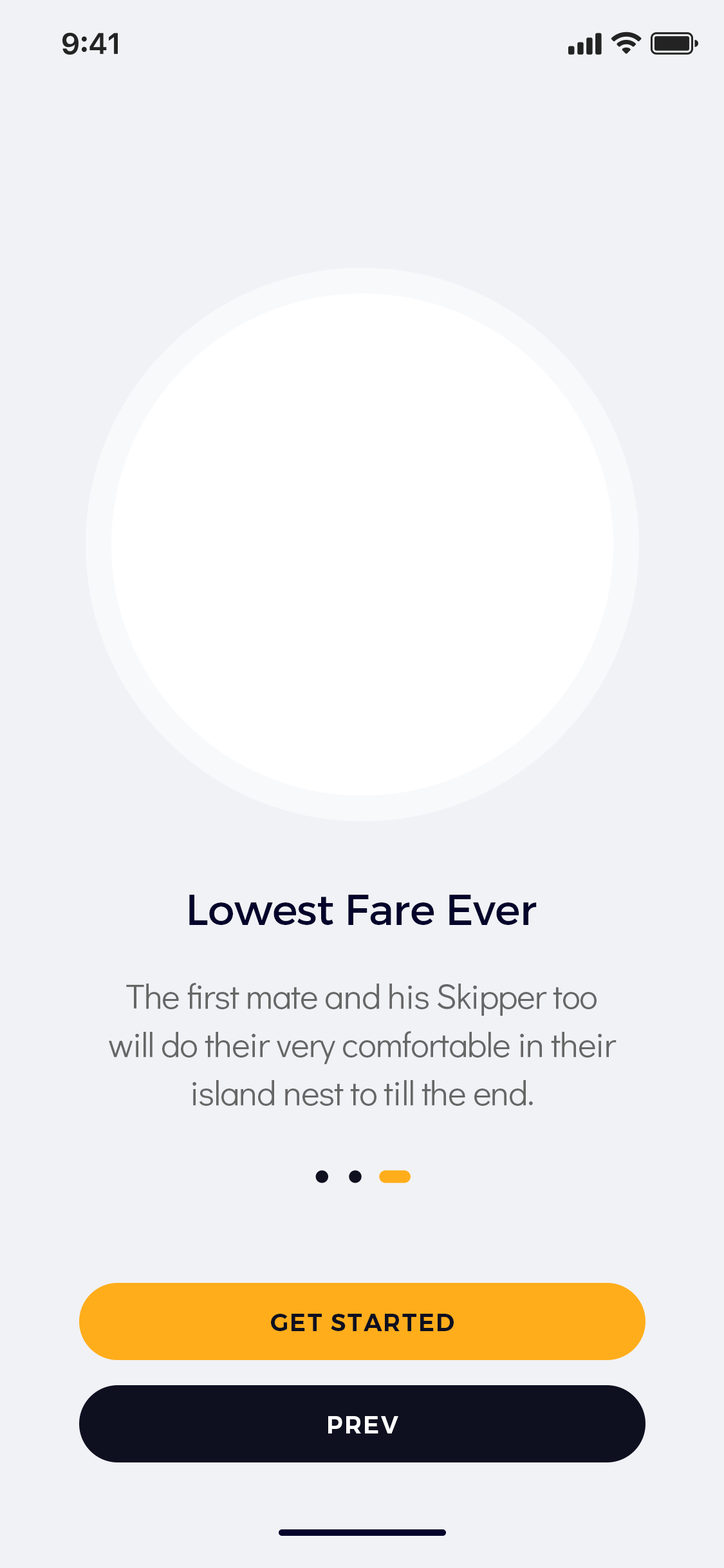
<style>
.page{position:relative;width:724px;height:1568px;background:#f1f2f6}
.page>*{position:absolute;margin:0}
.t1{font:42.9px "Montserrat-Regular";letter-spacing:-0.01em;color:#03032b}
.t2{font:34.9px/48.3px "DidactGothic-Regular";letter-spacing:-0.02em;color:#666666}
.t3{font:24.1px "Montserrat-SemiBold";letter-spacing:0.06em;color:#0e1020}
.t4{font:24.1px "Montserrat-SemiBold";letter-spacing:0.06em;color:#ffffff}
</style>
<div class="page">
<p class="t1" style="left:189px;top:895px;width:348px;height:30px">Lowest Fare Ever</p>
<p class="t2" style="left:109px;top:983px;width:508px;height:123px;text-align:center">The first mate and his Skipper too<br>will do their very comfortable in their island nest to till the end.</p>
<p class="t3" style="left:271px;top:1314px;width:183px;height:17px">GET STARTED</p>
<p class="t4" style="left:328px;top:1416px;width:70px;height:17px">PREV</p>
</div>
